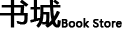
<style>
.page{position:relative;width:122px;height:29px;background:#ffffff}
.page>*{position:absolute;margin:0}
.t1{font:30px "MicrosoftYaHei";color:#000000;font-weight:bold}
.t2{font:11px "MicrosoftYaHei";color:#000000;font-weight:bold}
</style>
<div class="page">
<p class="t1" style="left:0px;top:0px;width:61px;height:28px">书城</p>
<p class="t2" style="left:61px;top:18px;width:61px;height:10px">Book Store</p>
</div>
